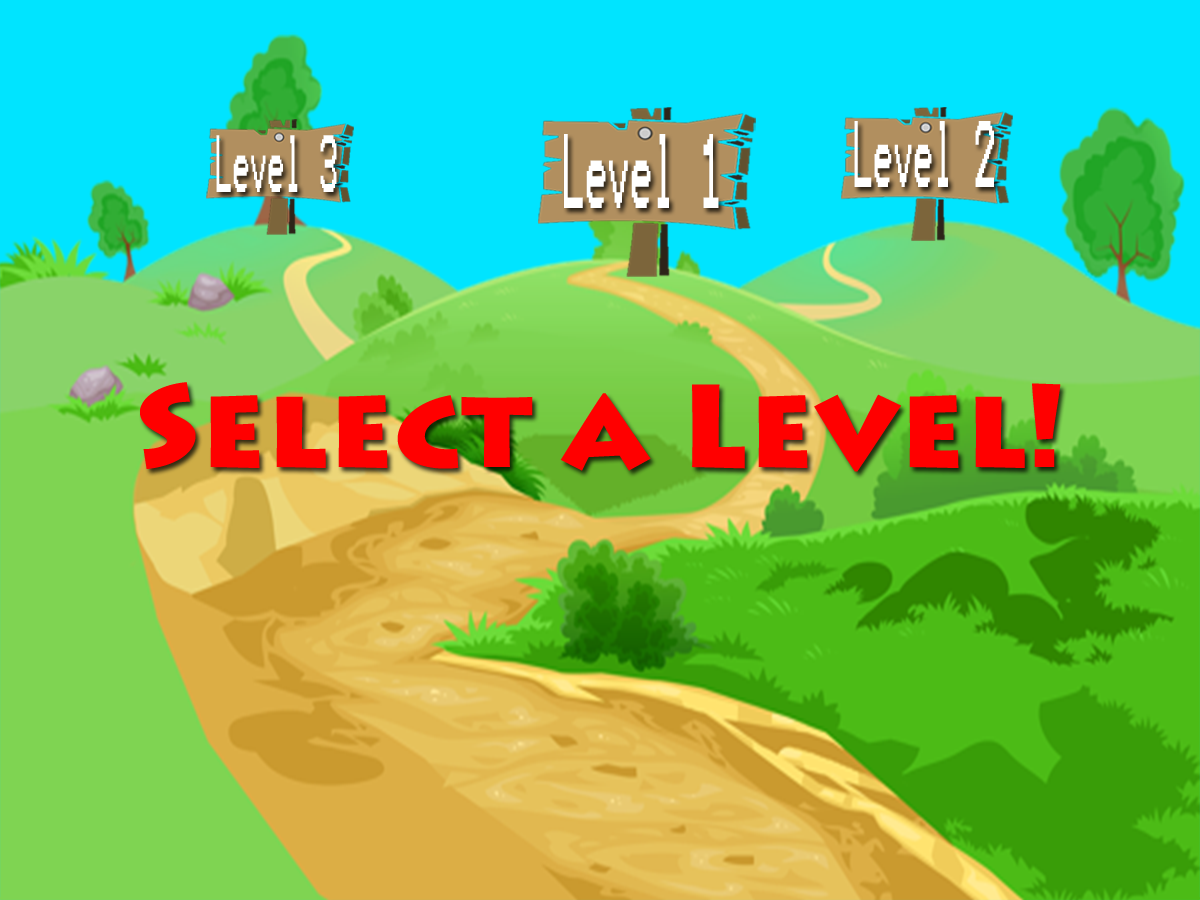
<style>
.page{position:relative;width:1200px;height:900px;background:#00e4ff}
.page>*{position:absolute;margin:0}
.t1{font:75.3px "Terminal";color:#ffffff;scale:0.36 1}
.t2{font:64.8px "Terminal";color:#ffffff;scale:0.36 1}
.t3{font:84.5px "Terminal";color:#ffffff;scale:0.36 1}
.t4{font:116.2px "LithosPro-Black";color:#ff0000}
</style>
<div class="page">
<p class="t1" style="left:854px;top:121px;width:140px;height:66px">Level 2</p>
<p class="t2" style="left:216px;top:135px;width:121px;height:57px">Level 3</p>
<p class="t3" style="left:564px;top:134px;width:155px;height:74px">Level 1</p>
<p class="t4" style="left:140px;top:382px;width:921px;height:90px">Select a Level!</p>
</div>
